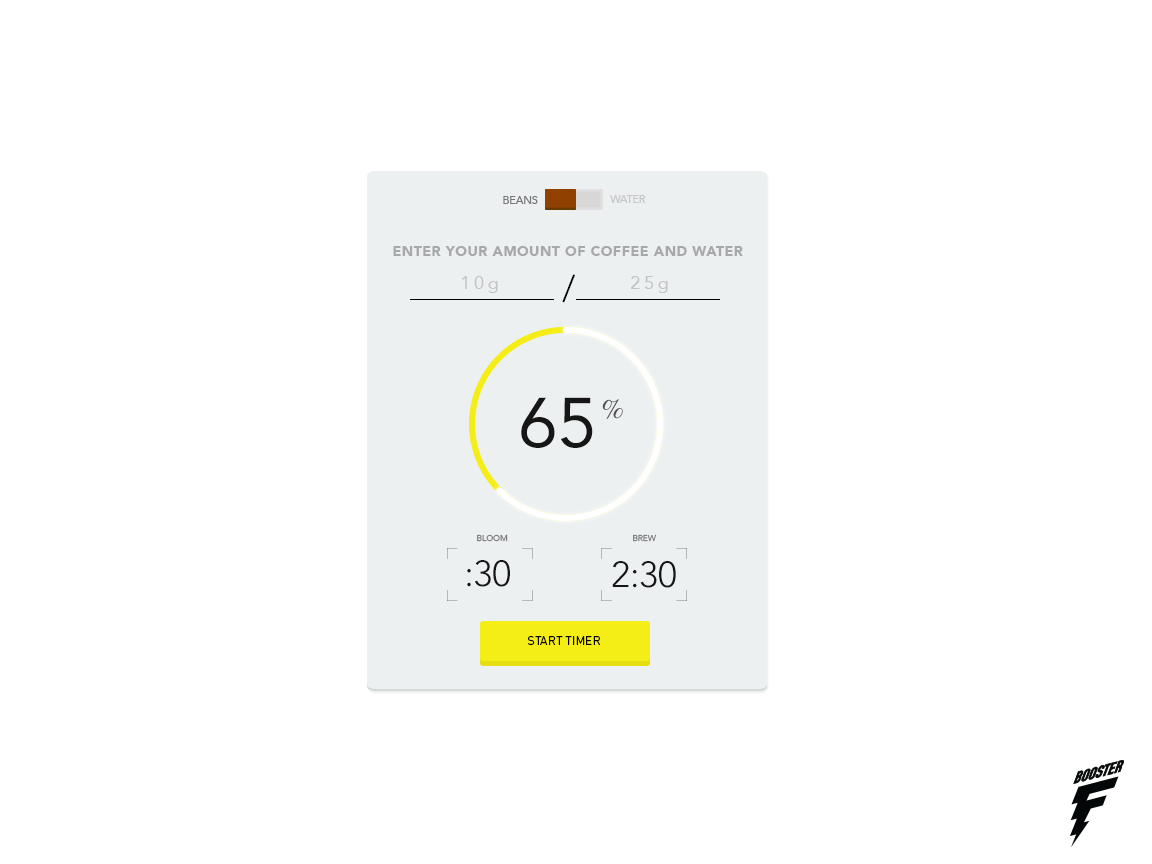
<style>
.page{position:relative;width:1152px;height:864px;background:#ffffff}
.page>*{position:absolute;margin:0}
.t1{font:11.4px "Avenir-Medium";color:#797878;text-transform:uppercase;scale:0.93 1}
.t2{font:11.4px "Avenir-Medium";color:#c7c7c7;text-transform:uppercase;scale:0.93 1}
.t3{font:13.7px "Avenir-Black";letter-spacing:0.05em;color:#a7a8ab;text-transform:uppercase}
.t4{font:18.1px "Avenir-Roman";letter-spacing:0.2em;color:#c4c4c4}
.t5{font:35.7px "Avenir-Light";letter-spacing:0.075em;color:#000000;text-transform:uppercase}
.t6{font:70px "Avenir-Roman";color:#161616}
.t7{font:26.9px "NewCenturySchlbkLTStd-Roman";color:#515151}
.t8{font:8.5px "Avenir-Roman";color:#797878;text-transform:uppercase}
.t9{font:36.2px "Avenir-Light";color:#161616}
.t10{font:12px "DIN-Regular";color:#000000;text-transform:uppercase}
</style>
<div class="page">
<p class="t1" style="left:503px;top:196px;width:35px;height:8px">BEANS</p>
<p class="t2" style="left:610px;top:195px;width:36px;height:8px">WATER</p>
<p class="t3" style="left:393px;top:246px;width:350px;height:10px">ENTER YOUR AMOUNT OF COFFEE AND WATER</p>
<p class="t4" style="left:462px;top:276px;width:36px;height:17px">10g</p>
<p class="t5" style="left:562px;top:274px;width:13px;height:29px">/</p>
<p class="t4" style="left:631px;top:276px;width:37px;height:17px">25g</p>
<p class="t6" style="left:521px;top:397px;width:72px;height:51px">65</p>
<p class="t7" style="left:602px;top:399px;width:21px;height:20px">%</p>
<p class="t8" style="left:477px;top:534px;width:31px;height:8px">BLOOM</p>
<p class="t8" style="left:633px;top:534px;width:23px;height:8px">BREW</p>
<p class="t9" style="left:467px;top:560px;width:43px;height:27px">:30</p>
<p class="t9" style="left:612px;top:561px;width:64px;height:27px">2:30</p>
<p class="t10" style="left:527px;top:636px;width:74px;height:9px">Start Timer</p>
</div>
